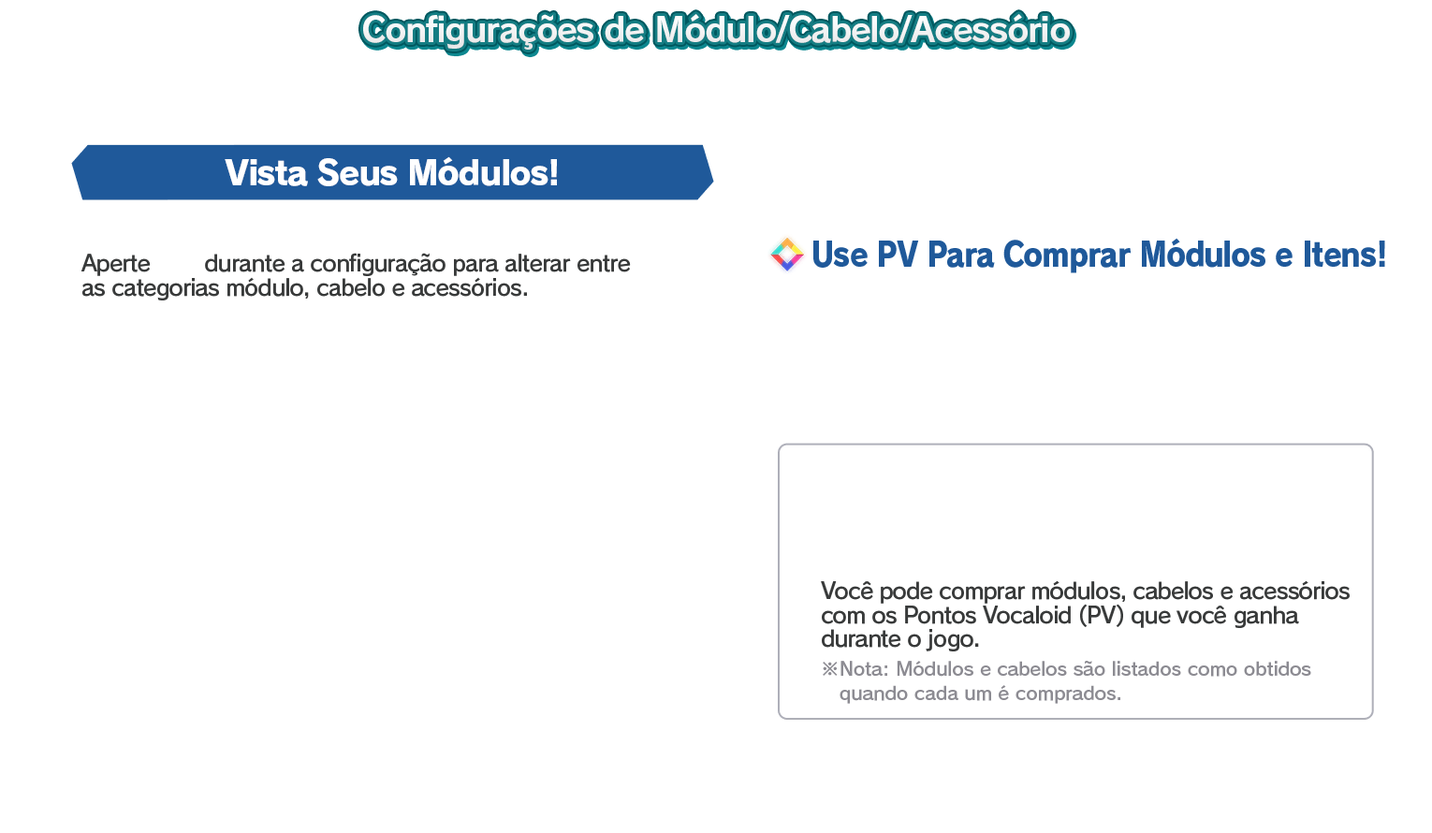
<style>
.page{position:relative;width:1432px;height:833px;background:#ffffff}
.page>*{position:absolute;margin:0}
.t1{font:33.7px "RodinPro-B";letter-spacing:-0.039em;color:#f2f2f3}
.t2{font:33.7px "RodinPro-EB";letter-spacing:-0.048em;color:#ffffff}
.t3{font:33.7px "RodinPro-EB";letter-spacing:-0.04em;color:#1f599a;scale:0.89 1}
.t4{font:22.5px/23.7px "RodinPro-DB";letter-spacing:-0.04em;color:#383a3a}
.t5{font:18.7px/23.7px "RodinPro-DB";letter-spacing:-0.014em;color:#8c8b92}
</style>
<div class="page">
<p class="t1" style="left:363px;top:14px;width:707px;height:36px">Configurações de Módulo/Cabelo/Acessório</p>
<p class="t2" style="left:225px;top:156px;width:332px;height:30px">Vista Seus Módulos!</p>
<p class="t3" style="left:813px;top:238px;width:572px;height:35px">Use PV Para Comprar Módulos e Itens!</p>
<p class="t4" style="left:81px;top:253px;width:550px;height:47px">Aperte        durante a configuração para alterar entre<br>as categorias módulo, cabelo e acessórios.</p>
<p class="t4" style="left:821px;top:580px;width:528px;height:71px">Você pode comprar módulos, cabelos e acessórios<br>com os Pontos Vocaloid (PV) que você ganha<br>durante o jogo.</p>
<p class="t5" style="left:823px;top:661px;width:488px;height:43px">※Nota: Módulos e cabelos são listados como obtidos<br>   quando cada um é comprados.</p>
</div>
